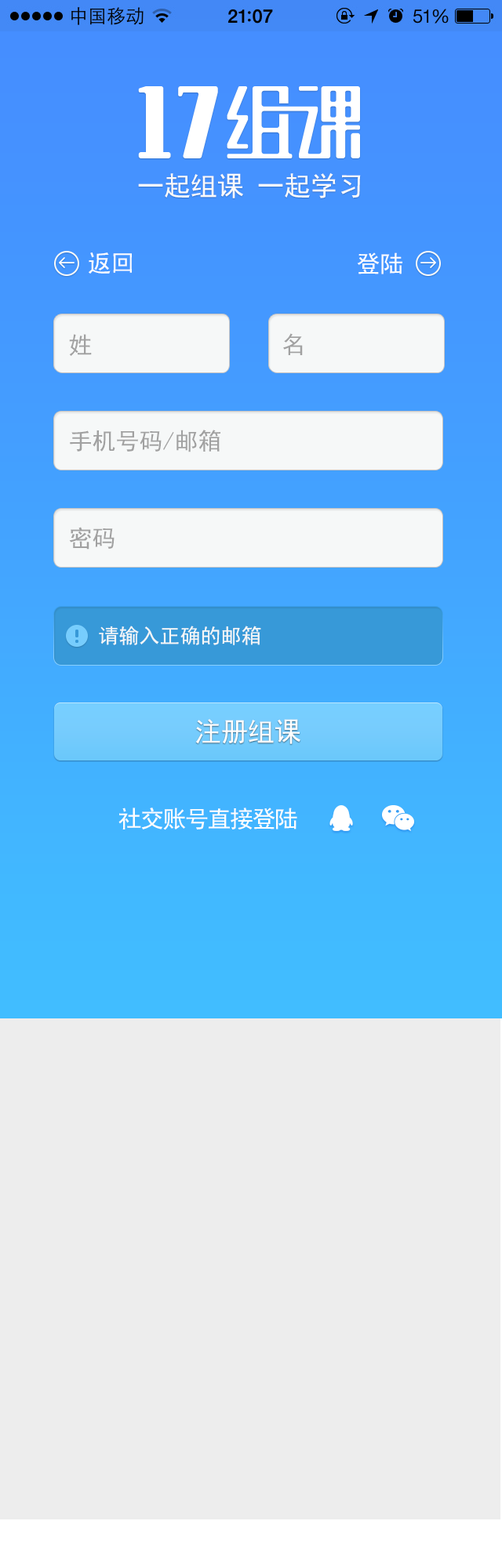
<style>
.page{position:relative;width:502px;height:1568px;background:#ededed}
.page>*{position:absolute;margin:0}
.t1{font:26.7px "SimHei";color:#fbfbfb}
.t2{font:23.5px "SimHei";color:#fefefe}
.t3{font:23.5px "SimHei";color:#a1a1a1}
.t4{font:20.4px "SimHei";color:#f6f8f8}
.t5{font:26.7px "SimHei";color:#fefefe}
.t6{font:23.5px "SimHei";letter-spacing:-0.05em;color:#fefefe}
</style>
<div class="page">
<p class="t1" style="left:138px;top:172px;width:223px;height:26px">一起组课 一起学习</p>
<p class="t2" style="left:89px;top:252px;width:43px;height:22px">返回</p>
<p class="t2" style="left:357px;top:252px;width:45px;height:22px">登陆</p>
<p class="t3" style="left:69px;top:334px;width:23px;height:22px">姓</p>
<p class="t3" style="left:283px;top:333px;width:20px;height:22px">名</p>
<p class="t3" style="left:70px;top:430px;width:150px;height:22px">手机号码/邮箱</p>
<p class="t3" style="left:69px;top:527px;width:45px;height:23px">密码</p>
<p class="t4" style="left:99px;top:626px;width:162px;height:19px">请输入正确的邮箱</p>
<p class="t5" style="left:195px;top:719px;width:105px;height:25px">注册组课</p>
<p class="t6" style="left:118px;top:808px;width:179px;height:22px">社交账号直接登陆</p>
</div>
